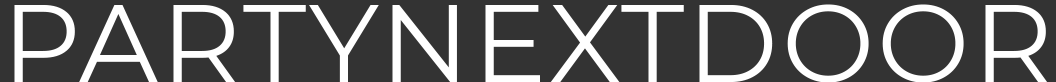
<style>
.page{position:relative;width:1056px;height:82px;background:#333333}
.page>*{position:absolute;margin:0}
.t1{font:110px "Montserrat-Regular";letter-spacing:0.03em;color:#ffffff;text-transform:uppercase}
</style>
<div class="page">
<p class="t1" style="left:14px;top:4px;width:1034px;height:79px">PARTYNEXTDOOR</p>
</div>
